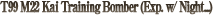
<style>
.page{position:relative;width:217px;height:15px;background:#ffffff}
.page>*{position:absolute;margin:0}
.t1{font:15px "RyuminPro-ExBold";letter-spacing:-0.1em;color:#4a3f32;font-weight:bold;scale:0.7 1}
</style>
<div class="page">
<p class="t1" style="left:0px;top:1px;width:213px;height:14px">T99 M22 Kai Training Bomber (Exp. w/ Night...)</p>
</div>
